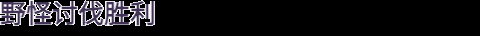
<style>
.page{position:relative;width:480px;height:36px;background:#000000}
.page>*{position:absolute;margin:0}
.t1{font:26px "WebPSD-18463539-0-Regular";color:#3f3254;font-weight:bold}
</style>
<div class="page">
<p class="t1" style="left:0px;top:0px;width:480px;height:36px">野怪讨伐胜利</p>
</div>
